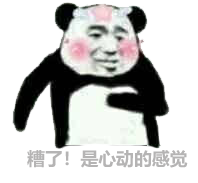
<style>
.page{position:relative;width:198px;height:183px;background:#ffffff}
.page>*{position:absolute;margin:0}
.t1{font:18px "MicrosoftYaHei-Bold";letter-spacing:-0.01em;color:#b5b4b4}
</style>
<div class="page">
<p class="t1" style="left:27px;top:150px;width:161px;height:18px">糟了！是心动的感觉</p>
</div>
